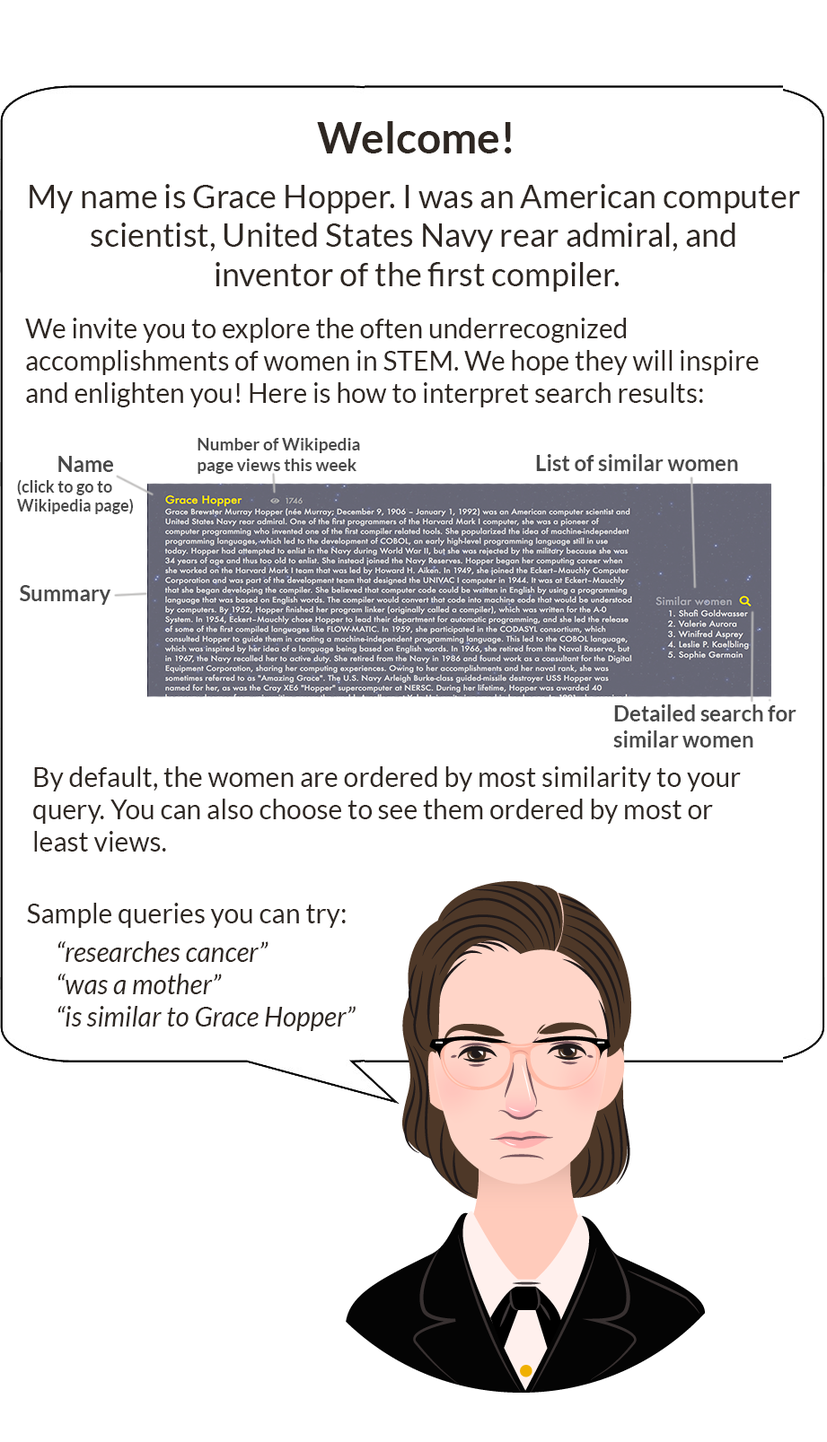
<style>
.page{position:relative;width:827px;height:1442px;background:#ffffff}
.page>*{position:absolute;margin:0}
.t1{font:43.1px "Lato-Bold";color:#2e2722}
.t2{font:32.3px "Lato-Regular";color:#2e2722}
.t3{font:26.9px "Lato-Regular";color:#2e2722}
.t4{font:17.1px "Lato-Bold";color:#484848}
.t5{font:21.5px "Lato-Bold";color:#484848}
.t6{font:16.2px "Lato-Bold";color:#484848}
.t7{font:26.9px "Lato-Italic";color:#2e2722}
</style>
<div class="page">
<p class="t1" style="left:317px;top:121px;width:195px;height:32px">Welcome!</p>
<p class="t2" style="left:30px;top:184px;width:770px;height:108px;text-align:center">My name is Grace Hopper. I was an American computer <br>scientist, United States Navy rear admiral, and <br>inventor of the first compiler.</p>
<p class="t3" style="left:25px;top:318px;width:733px;height:90px">We invite you to explore the often underrecognized <br>accomplishments of women in STEM. We hope they will inspire <br>and enlighten you! Here is how to interpret search results:</p>
<p class="t4" style="left:197px;top:438px;width:163px;height:36px">Number of Wikipedia<br>page views this week</p>
<p class="t5" style="left:58px;top:456px;width:55px;height:16px">Name</p>
<p class="t5" style="left:536px;top:454px;width:202px;height:17px">List of similar women</p>
<p class="t6" style="left:16px;top:479px;width:117px;height:35px">(click to go to<br>Wikipedia page)</p>
<p class="t5" style="left:20px;top:585px;width:90px;height:20px">Summary</p>
<p class="t5" style="left:613px;top:705px;width:183px;height:43px">Detailed search for<br>similar women</p>
<p class="t3" style="left:33px;top:767px;width:708px;height:85px">By default, the women are ordered by most similarity to your<br>query. You can also choose to see them ordered by most or <br>least views.</p>
<p class="t3" style="left:27px;top:903px;width:319px;height:25px">Sample queries you can try:</p>
<p class="t7" style="left:57px;top:942px;width:298px;height:89px">“researches cancer”<br> “was a mother”<br> “is similar to Grace Hopper”</p>
</div>
